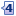
<style>
.page{position:relative;width:16px;height:16px;background:#ffffff}
.page>*{position:absolute;margin:0}
.t1{font:11px "Verdana-Bold";letter-spacing:0.04em;color:#0a2f7a}
</style>
<div class="page">
<p class="t1" style="left:5px;top:4px;width:8px;height:8px">4</p>
</div>
